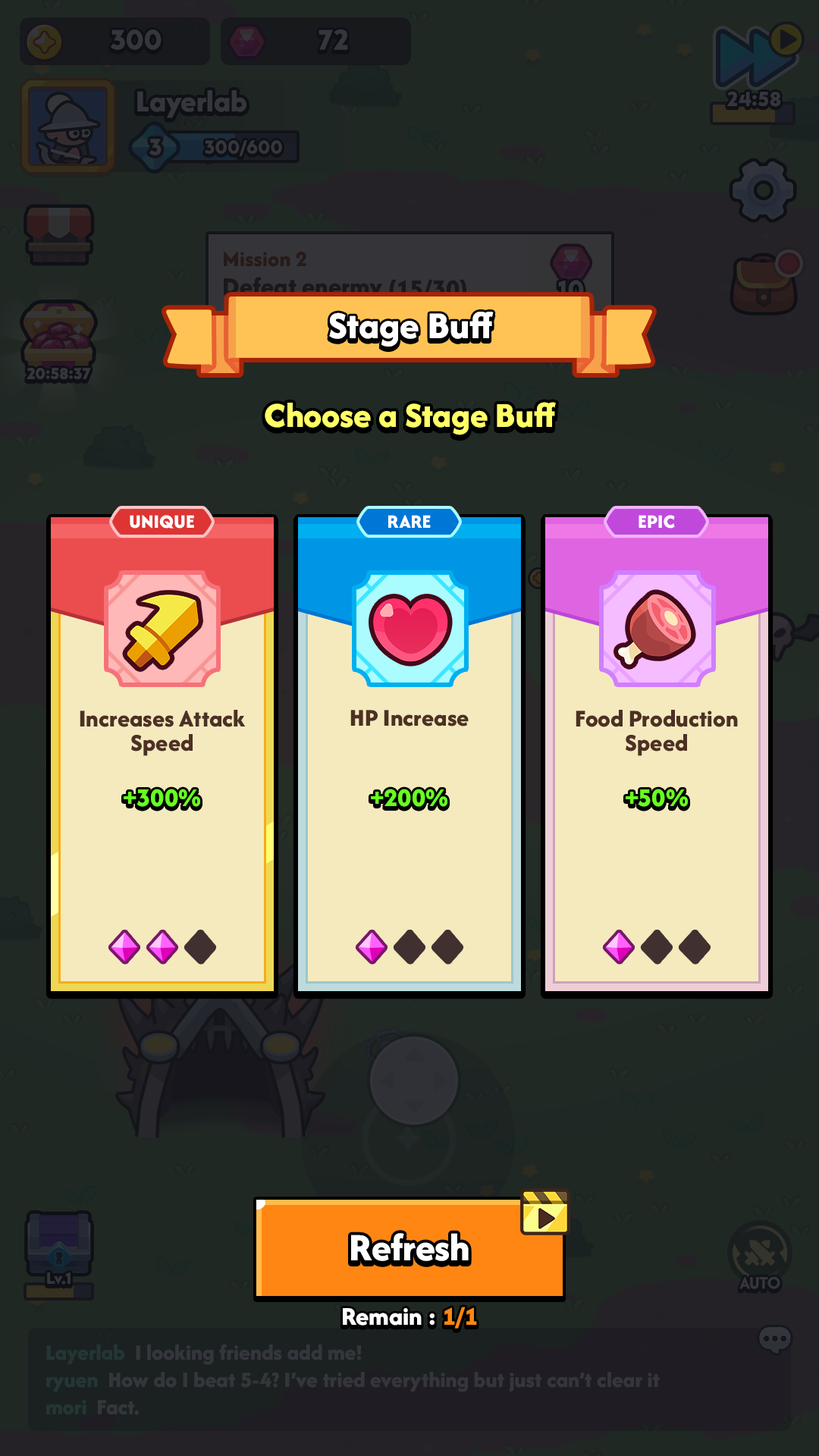
<style>
.page{position:relative;width:819px;height:1456px}
.page>*{position:absolute;margin:0}
.t1{font:39.4px "AfacadFlux-ExtraBold";color:#ffffff}
.t2{font:36.4px "AfacadFlux-ExtraBold";color:#ffff66}
.t3{font:19.7px "AfacadFlux-ExtraBold";color:#ffffff;text-transform:uppercase}
.t4{font:25px/24.3px "AfacadFlux-ExtraBold";color:#4d3024}
.t5{font:25px "AfacadFlux-ExtraBold";color:#4d3024}
.t6{font:26.5px "AfacadFlux-ExtraBold";color:#69ff20;text-transform:uppercase}
.t7{font:40.2px "AfacadFlux-ExtraBold";color:#ffffff}
.t8{font:26.5px "AfacadFlux-ExtraBold";color:#ffffff}
.t9{font:26.5px "AfacadFlux-ExtraBold";color:#ff8612}
</style>
<div class="page">
<p class="t1" style="left:329px;top:312px;width:165px;height:35px">Stage Buff</p>
<p class="t2" style="left:265px;top:402px;width:291px;height:33px">Choose a Stage Buff</p>
<p class="t3" style="left:130px;top:515px;width:64px;height:14px">Unique</p>
<p class="t3" style="left:388px;top:515px;width:43px;height:13px">Rare</p>
<p class="t3" style="left:639px;top:515px;width:36px;height:14px">Epic</p>
<p class="t4" style="left:80px;top:710px;width:166px;height:46px;text-align:center">Increases Attack<br>Speed</p>
<p class="t5" style="left:350px;top:710px;width:119px;height:16px">HP Increase</p>
<p class="t4" style="left:576px;top:710px;width:162px;height:46px;text-align:center">Food Production<br>Speed</p>
<p class="t6" style="left:124px;top:789px;width:76px;height:18px">+300%</p>
<p class="t6" style="left:371px;top:789px;width:76px;height:18px">+200%</p>
<p class="t6" style="left:626px;top:789px;width:62px;height:18px">+50%</p>
<p class="t7" style="left:351px;top:1233px;width:118px;height:28px">Refresh</p>
<p class="t8" style="left:343px;top:1307px;width:134px;height:22px">Remain : <span class="t9">1/1</span></p>
</div>
